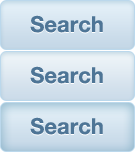
<style>
.page{position:relative;width:135px;height:153px}
.page>*{position:absolute;margin:0}
.t1{font:22px "HelveticaNeue-Bold";color:#4e7596}
</style>
<div class="page">
<p class="t1" style="left:30px;top:15px;width:73px;height:18px">Search</p>
<p class="t1" style="left:30px;top:66px;width:73px;height:18px">Search</p>
<p class="t1" style="left:30px;top:117px;width:73px;height:18px">Search</p>
</div>
